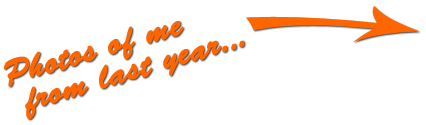
<style>
.page{position:relative;width:426px;height:125px;background:#ffffff}
.page>*{position:absolute;margin:0}
.t1{font:34px/30px "BrushScriptStd";color:#ff6600;font-weight:bold}
</style>
<div class="page">
<p class="t1" style="left:4px;top:21px;width:241px;height:99px;rotate:-17deg">Photos of me<br> from last year...</p>
</div>
